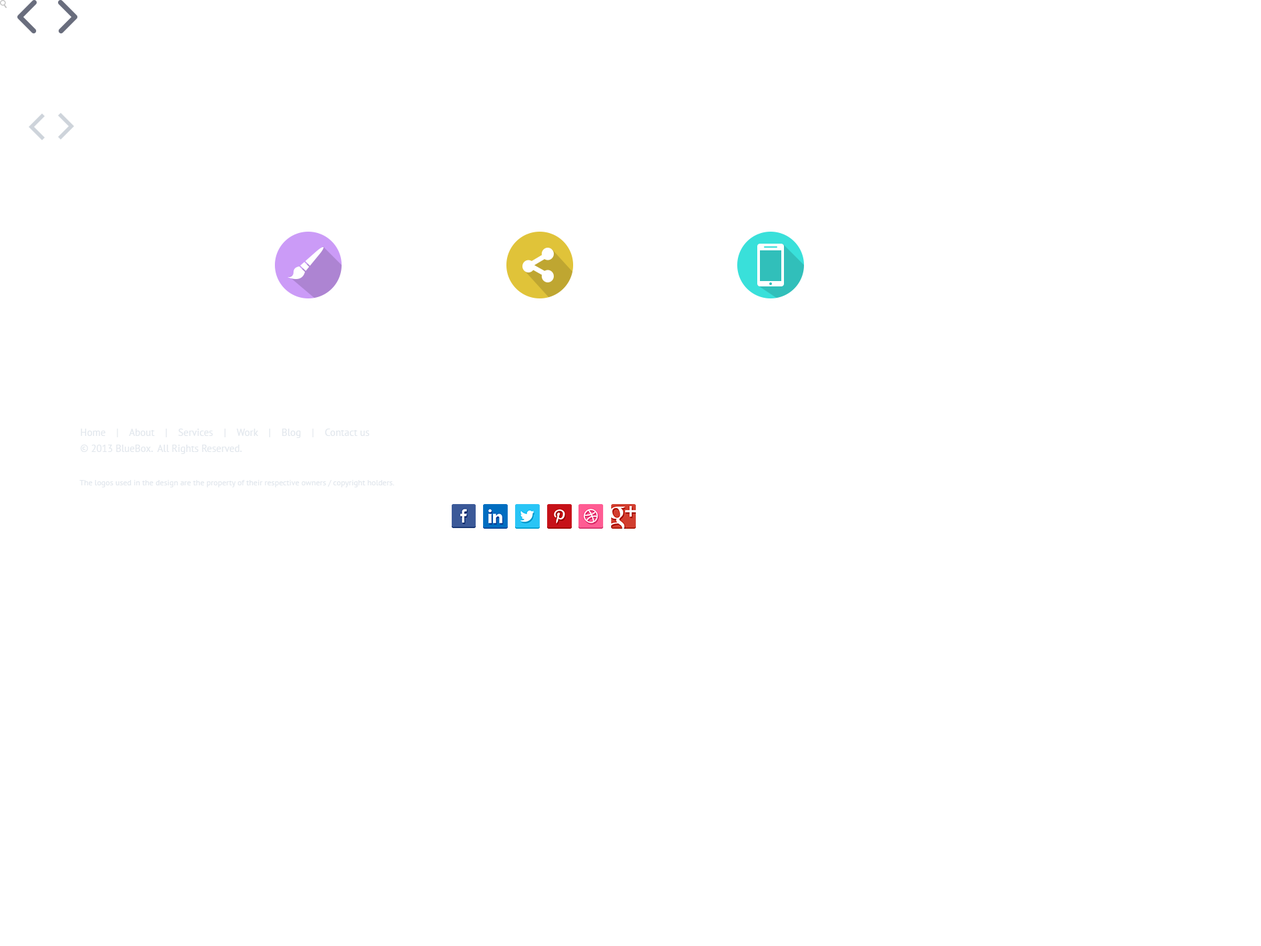
<style>
.page{position:relative;width:1261px;height:946px;background:#ffffff}
.page>*{position:absolute;margin:0}
.t1{font:10px/16px "PTSans-Regular";color:#e2e7ed}
.t2{font:8px "PTSans-Regular";color:#e2e7ed}
.t3{font:10px "PTSans-Regular";color:#e2e7ed}
</style>
<div class="page">
<p class="t1" style="left:80px;top:428px;width:290px;height:26px">Home    |    About    |    Services    |    Work    |    Blog    |    Contact us<br>© 2013 BlueBox.  All Rights Reserved.</p>
<p class="t2" style="left:79px;top:480px;width:315px;height:7px"><span class="t3"><br><br></span>The logos used in the design are the property of their respective owners / copyright holders.</p>
</div>
